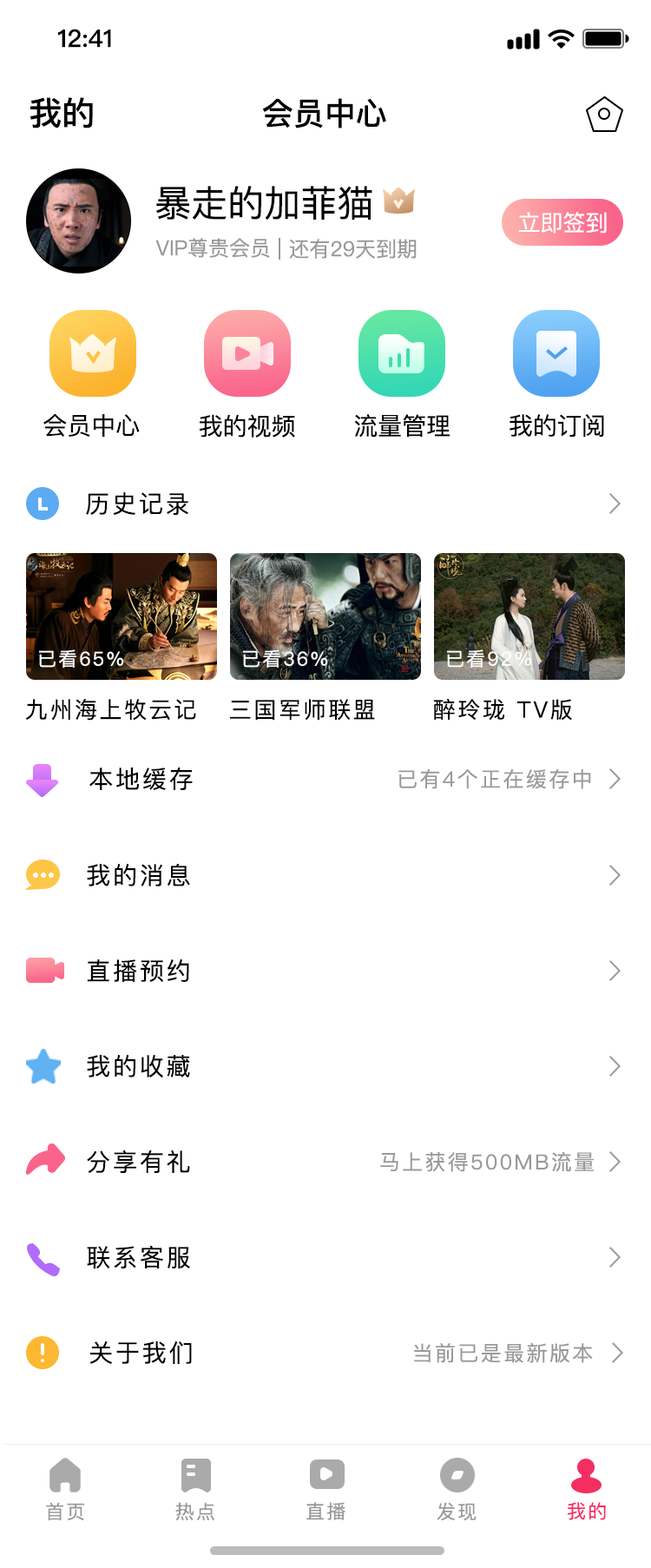
<style>
.page{position:relative;width:651px;height:1568px;background:#ffffff}
.page>*{position:absolute;margin:0}
.t1{font:24.3px "PingFangSC-Medium";color:#000000}
.t2{font:33px "PingFangSC-Medium";color:#000000}
.t3{font:31.3px "PingFangSC-Medium";color:#000000}
.t4{font:36.5px "PingFangSC-Regular";color:#000000}
.t5{font:22.6px "PingFangSC-Regular";color:#ffffff}
.t6{font:20.8px "PingFangSC-Regular";color:#999999}
.t7{font:24.3px "PingFangSC-Regular";color:#000000}
.t8{font:24.3px "PingFangSC-Regular";letter-spacing:0.1em;color:#000000}
.t9{font:19.1px "PingFangSC-Regular";letter-spacing:0.1em;color:#ffffff}
.t10{font:22.6px "PingFangSC-Regular";letter-spacing:0.1em;color:#000000}
.t11{font:20.8px "PingFangSC-Regular";letter-spacing:0.1em;color:#999999}
.t12{font:19.1px "PingFangSC-Regular";letter-spacing:0.1em;color:#999999}
.t13{font:19.1px "PingFangSC-Regular";letter-spacing:0.1em;color:#f42e61}
</style>
<div class="page">
<p class="t1" style="left:58px;top:29px;width:53px;height:19px">12:41</p>
<p class="t2" style="left:30px;top:97px;width:63px;height:31px">我的</p>
<p class="t3" style="left:262px;top:98px;width:124px;height:30px">会员中心</p>
<p class="t4" style="left:156px;top:186px;width:216px;height:35px">暴走的加菲猫</p>
<p class="t5" style="left:518px;top:212px;width:89px;height:22px">立即签到</p>
<p class="t6" style="left:155px;top:238px;width:115px;height:20px">VIP尊贵会员</p>
<p class="t6" style="left:289px;top:239px;width:128px;height:20px">还有29天到期</p>
<p class="t7" style="left:43px;top:414px;width:97px;height:24px">会员中心</p>
<p class="t7" style="left:200px;top:414px;width:95px;height:24px">我的视频</p>
<p class="t7" style="left:354px;top:414px;width:96px;height:24px">流量管理</p>
<p class="t7" style="left:510px;top:414px;width:94px;height:24px">我的订阅</p>
<p class="t8" style="left:86px;top:492px;width:102px;height:23px">历史记录</p>
<p class="t9" style="left:39px;top:649px;width:84px;height:19px">已看65%</p>
<p class="t9" style="left:243px;top:649px;width:84px;height:19px">已看36%</p>
<p class="t9" style="left:447px;top:649px;width:84px;height:19px">已看92%</p>
<p class="t10" style="left:25px;top:699px;width:171px;height:22px">九州海上牧云记</p>
<p class="t10" style="left:230px;top:699px;width:145px;height:22px">三国军师联盟</p>
<p class="t10" style="left:433px;top:699px;width:139px;height:22px">醉玲珑 TV版</p>
<p class="t8" style="left:89px;top:768px;width:104px;height:22px">本地缓存</p>
<p class="t11" style="left:399px;top:769px;width:192px;height:20px">已有4个正在缓存中</p>
<p class="t8" style="left:87px;top:864px;width:103px;height:22px">我的消息</p>
<p class="t8" style="left:87px;top:959px;width:102px;height:23px">直播预约</p>
<p class="t8" style="left:87px;top:1055px;width:103px;height:22px">我的收藏</p>
<p class="t8" style="left:87px;top:1150px;width:103px;height:23px">分享有礼</p>
<p class="t11" style="left:380px;top:1151px;width:214px;height:21px">马上获得500MB流量</p>
<p class="t8" style="left:87px;top:1245px;width:103px;height:24px">联系客服</p>
<p class="t8" style="left:89px;top:1341px;width:103px;height:23px">关于我们</p>
<p class="t11" style="left:414px;top:1342px;width:179px;height:21px">当前已是最新版本</p>
<p class="t12" style="left:46px;top:1502px;width:39px;height:19px">首页</p>
<p class="t12" style="left:175px;top:1502px;width:39px;height:19px">热点</p>
<p class="t12" style="left:306px;top:1502px;width:40px;height:18px">直播</p>
<p class="t12" style="left:437px;top:1502px;width:40px;height:19px">发现</p>
<p class="t13" style="left:568px;top:1502px;width:38px;height:18px">我的</p>
</div>
